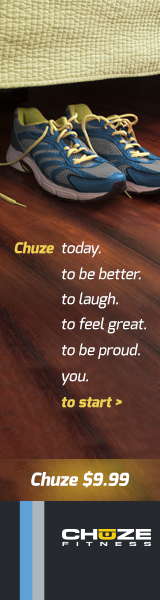
<style>
.page{position:relative;width:160px;height:600px}
.page>*{position:absolute;margin:0}
.t1{font:14.8px "Exo-ExtraBold";color:#eecf54;font-style:italic}
.t2{font:14.8px "Exo-Medium";color:#ffffff;font-style:italic}
.t3{font:17.7px "Exo-ExtraBold";color:#ffffff;font-style:italic}
</style>
<div class="page">
<p class="t1" style="left:14px;top:241px;width:40px;height:13px">Chuze</p>
<p class="t2" style="left:62px;top:241px;width:39px;height:17px">today.</p>
<p class="t2" style="left:62px;top:267px;width:79px;height:13px">to be better.</p>
<p class="t2" style="left:62px;top:292px;width:56px;height:17px">to laugh.</p>
<p class="t2" style="left:62px;top:317px;width:84px;height:17px">to feel great.</p>
<p class="t2" style="left:62px;top:343px;width:78px;height:16px">to be proud.</p>
<p class="t2" style="left:62px;top:373px;width:26px;height:13px">you.</p>
<p class="t1" style="left:61px;top:397px;width:61px;height:11px">to start &gt;</p>
<p class="t3" style="left:31px;top:471px;width:99px;height:17px">Chuze $9.99</p>
</div>
